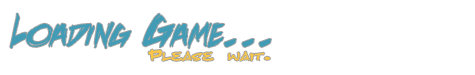
<style>
.page{position:relative;width:475px;height:75px;background:#ffffff}
.page>*{position:absolute;margin:0}
.t1{font:55px "DeathRattleBB";color:#439cb5;font-variant:small-caps;scale:1.1 1}
.t2{font:21.6px "Fearless";color:#fdc745;font-variant:small-caps;scale:1.33 1}
</style>
<div class="page">
<p class="t1" style="left:10px;top:13px;width:261px;height:36px">Loading Game...</p>
<p class="t2" style="left:148px;top:49px;width:122px;height:12px">Please wait.</p>
</div>
